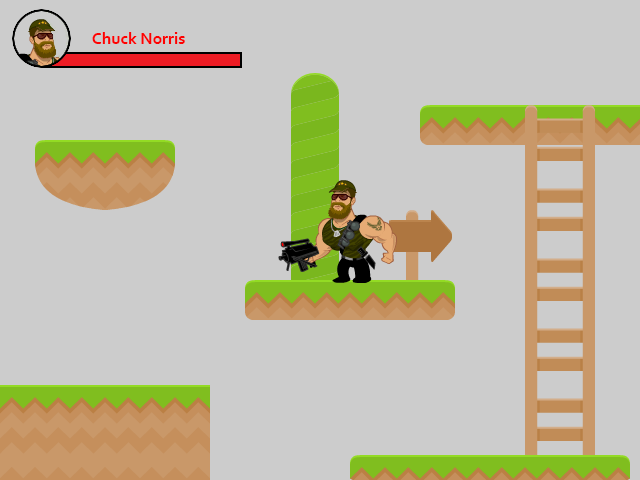
<style>
.page{position:relative;width:640px;height:480px;background:#cccccc}
.page>*{position:absolute;margin:0}
.t1{font:17px "Corbel-Bold";color:#fd0202}
</style>
<div class="page">
<p class="t1" style="left:92px;top:32px;width:93px;height:12px">Chuck Norris</p>
</div>
